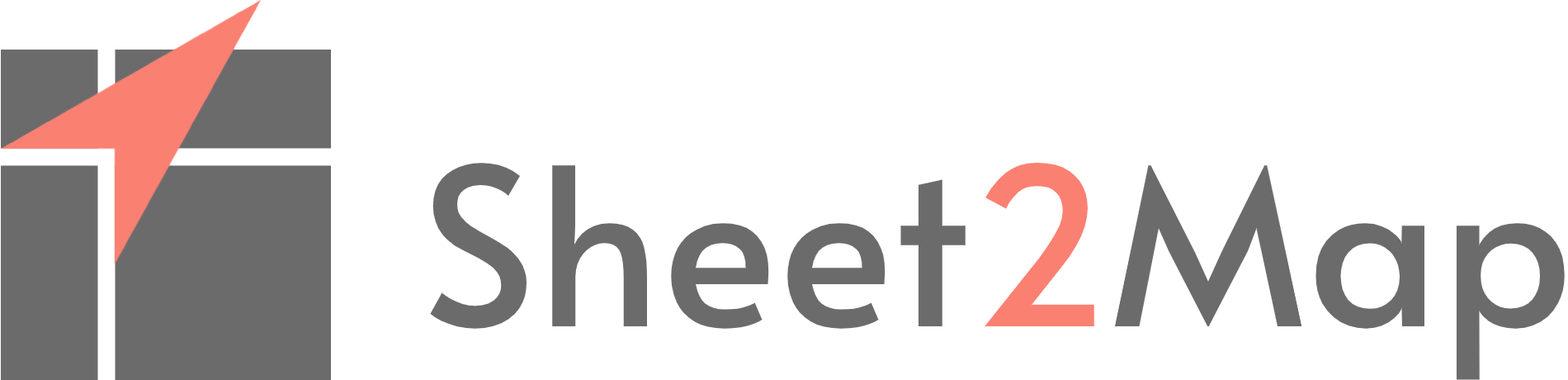
<style>
.page{position:relative;width:1568px;height:380px;background:#ffffff}
.page>*{position:absolute;margin:0}
.t1{font:218.7px "Alata-Regular";color:#6b6b6b}
.t2{font:218.7px "Alata-Regular";color:#fa8072}
</style>
<div class="page">
<p class="t1" style="left:430px;top:163px;width:1135px;height:217px">Sheet<span class="t2">2</span>Map</p>
</div>
